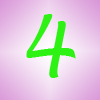
<style>
.page{position:relative;width:100px;height:100px}
.page>*{position:absolute;margin:0}
.t1{font:83.3px "LucidaHandwriting-Italic";color:#2df213}
</style>
<div class="page">
<p class="t1" style="left:26px;top:14px;width:50px;height:64px">4</p>
</div>
